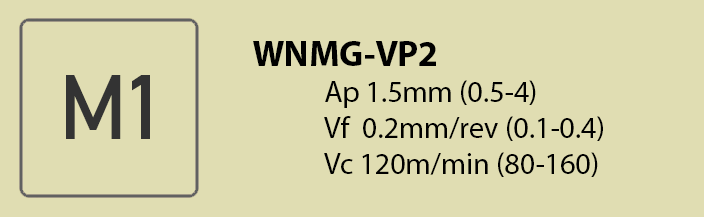
<style>
.page{position:relative;width:704px;height:217px;background:#e0ddb2}
.page>*{position:absolute;margin:0}
.t1{font:30px "MyriadPro-Regular";color:#000000}
.t2{font:36px "MyriadPro-Bold";color:#000000}
</style>
<div class="page">
<p class="t1" style="left:253px;top:41px;width:350px;height:136px"><span class="t2">WNMG-VP2<br></span>  Ap 1.5mm (0.5-4)<br>  Vf  0.2mm/rev (0.1-0.4)<br>  Vc 120m/min (80-160)</p>
</div>
